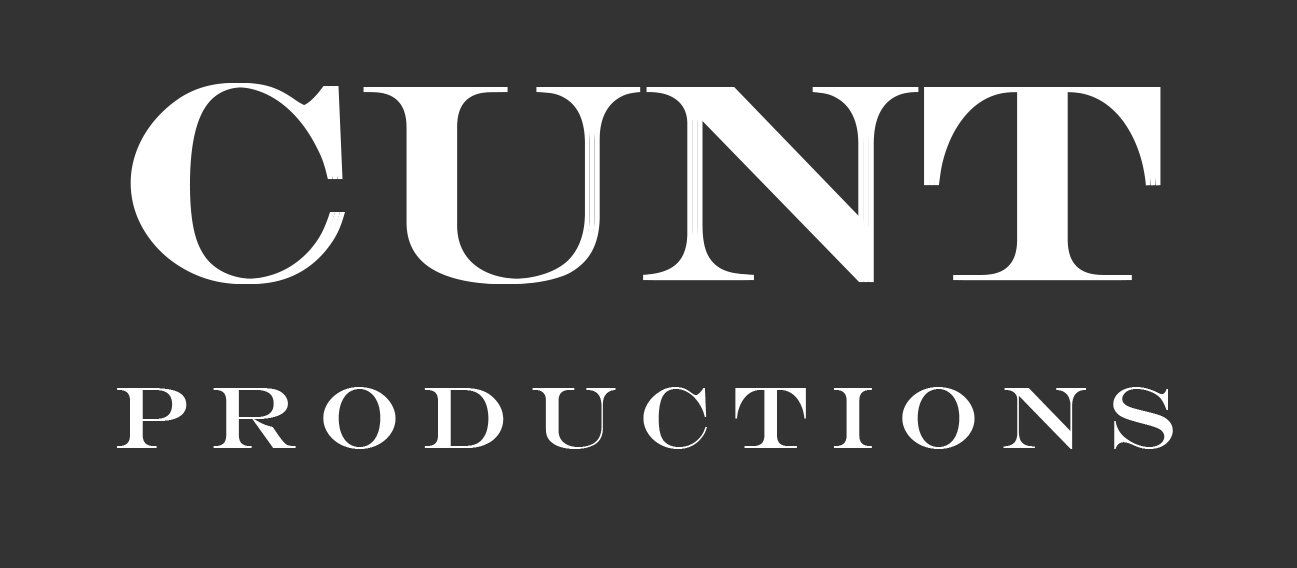
<style>
.page{position:relative;width:1297px;height:568px;background:#333333}
.page>*{position:absolute;margin:0}
.t1{font:283.3px "EngraversMT";color:#ffffff}
.t2{font:87.5px "EngraversMT";letter-spacing:0.26em;color:#ffffff}
</style>
<div class="page">
<p class="t1" style="left:130px;top:83px;width:1021px;height:201px">CUNT</p>
<p class="t1" style="left:135px;top:83px;width:1021px;height:201px">CUNT</p>
<p class="t1" style="left:140px;top:83px;width:1021px;height:201px">CUNT</p>
<p class="t2" style="left:117px;top:387px;width:1056px;height:62px">PRODUCTIONS</p>
</div>
